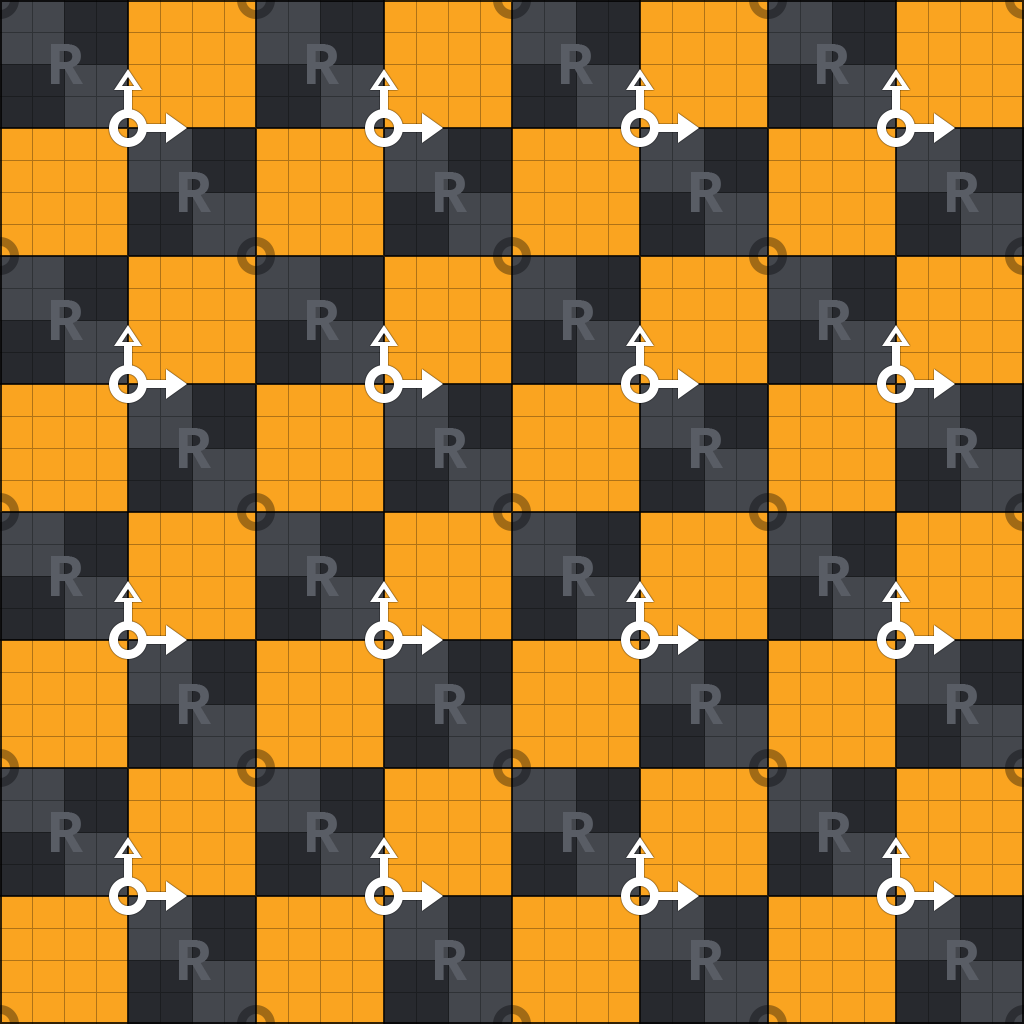
<style>
.page{position:relative;width:1024px;height:1024px;background:#faa420}
.page>*{position:absolute;margin:0}
.t1{font:60px "LiberationMono-Bold";letter-spacing:0.12em;color:#595d65;text-transform:uppercase}
</style>
<div class="page">
<p class="t1" style="left:51px;top:44px;width:32px;height:40px">R</p>
<p class="t1" style="left:307px;top:44px;width:32px;height:40px">R</p>
<p class="t1" style="left:561px;top:44px;width:32px;height:40px">R</p>
<p class="t1" style="left:817px;top:44px;width:32px;height:40px">R</p>
<p class="t1" style="left:179px;top:172px;width:32px;height:40px">R</p>
<p class="t1" style="left:435px;top:172px;width:32px;height:40px">R</p>
<p class="t1" style="left:691px;top:172px;width:32px;height:40px">R</p>
<p class="t1" style="left:947px;top:172px;width:32px;height:40px">R</p>
<p class="t1" style="left:51px;top:300px;width:32px;height:40px">R</p>
<p class="t1" style="left:307px;top:300px;width:32px;height:40px">R</p>
<p class="t1" style="left:563px;top:300px;width:32px;height:40px">R</p>
<p class="t1" style="left:819px;top:300px;width:32px;height:40px">R</p>
<p class="t1" style="left:179px;top:428px;width:32px;height:40px">R</p>
<p class="t1" style="left:435px;top:428px;width:32px;height:40px">R</p>
<p class="t1" style="left:691px;top:428px;width:32px;height:40px">R</p>
<p class="t1" style="left:947px;top:428px;width:32px;height:40px">R</p>
<p class="t1" style="left:51px;top:556px;width:32px;height:40px">R</p>
<p class="t1" style="left:307px;top:556px;width:32px;height:40px">R</p>
<p class="t1" style="left:563px;top:556px;width:32px;height:40px">R</p>
<p class="t1" style="left:819px;top:556px;width:32px;height:40px">R</p>
<p class="t1" style="left:179px;top:684px;width:32px;height:40px">R</p>
<p class="t1" style="left:435px;top:684px;width:32px;height:40px">R</p>
<p class="t1" style="left:691px;top:684px;width:32px;height:40px">R</p>
<p class="t1" style="left:947px;top:684px;width:32px;height:40px">R</p>
<p class="t1" style="left:51px;top:812px;width:32px;height:40px">R</p>
<p class="t1" style="left:307px;top:812px;width:32px;height:40px">R</p>
<p class="t1" style="left:563px;top:812px;width:32px;height:40px">R</p>
<p class="t1" style="left:819px;top:812px;width:32px;height:40px">R</p>
<p class="t1" style="left:179px;top:940px;width:32px;height:40px">R</p>
<p class="t1" style="left:435px;top:940px;width:32px;height:40px">R</p>
<p class="t1" style="left:691px;top:940px;width:32px;height:40px">R</p>
<p class="t1" style="left:947px;top:940px;width:32px;height:40px">R</p>
</div>
